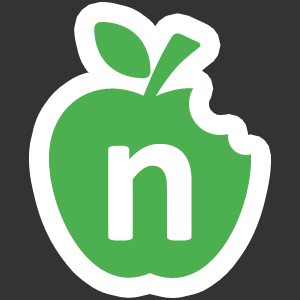
<style>
.page{position:relative;width:300px;height:300px;background:#333333}
.page>*{position:absolute;margin:0}
.t1{font:200px "Calibri-Bold";color:#ffffff}
</style>
<div class="page">
<p class="t1" style="left:108px;top:144px;width:84px;height:97px">n</p>
</div>
